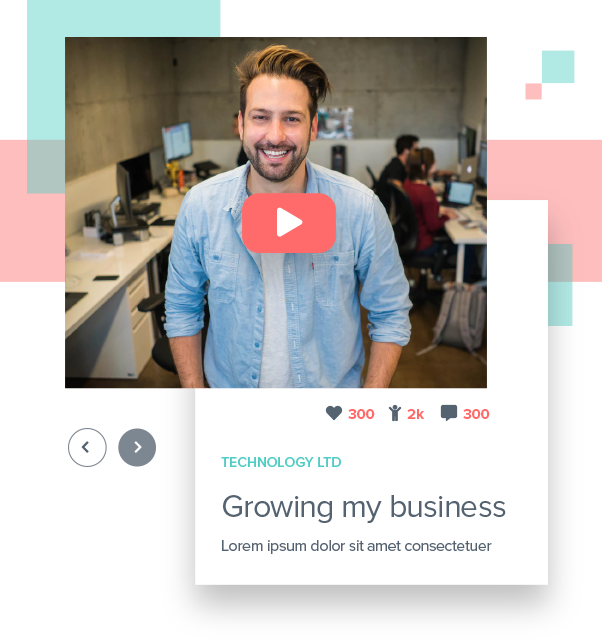
<style>
.page{position:relative;width:602px;height:641px;background:#ffffff}
.page>*{position:absolute;margin:0}
.t1{font:16px/24px "ProximaNova-Regular";letter-spacing:-0.025em;color:#556270}
.t2{font:14px/24px "ProximaNova-Semibold";color:#4ecdc4}
.t3{font:32px/40px "ProximaNova-Regular";letter-spacing:-0.025em;color:#556270}
</style>
<div class="page">
<p class="t1" style="left:221px;top:457px;width:285px;height:97px"><span class="t2">TECHNOLOGY LTD<br></span><span class="t3">Growing my business<br></span>Lorem ipsum dolor sit amet consectetuer</p>
</div>
